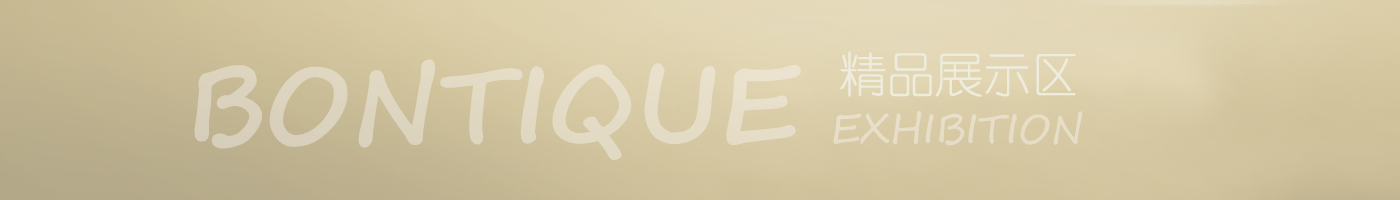
<style>
.page{position:relative;width:1400px;height:200px}
.page>*{position:absolute;margin:0}
.t1{font:48px "YouYuan";color:#edecdd}
.t2{font:40px "SegoeScript";color:#e3dac4}
.t3{font:106.7px "SegoeScript-Bold";color:#e3dac4}
</style>
<div class="page">
<p class="t1" style="left:840px;top:51px;width:236px;height:46px">精品展示区</p>
<p class="t2" style="left:194px;top:59px;width:889px;height:102px"><span class="t3">BONTIQUE  </span>EXHIBITION</p>
</div>
